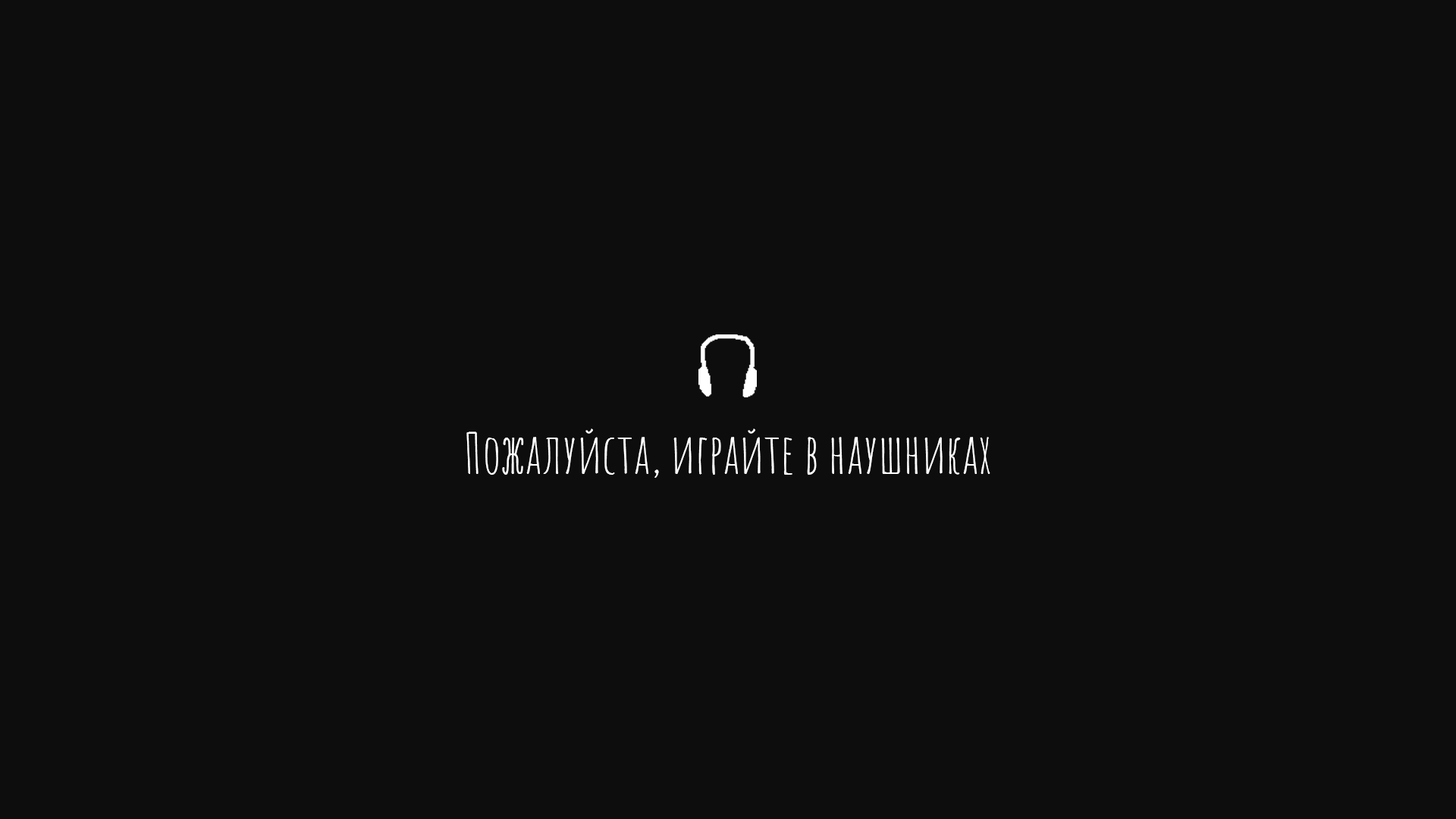
<style>
.page{position:relative;width:1456px;height:819px;background:#0d0d0d}
.page>*{position:absolute;margin:0}
.t1{font:54.6px "AmaticSC-Regular";color:#ffffff}
</style>
<div class="page">
<p class="t1" style="left:466px;top:428px;width:524px;height:50px">Пожалуйста, играйте в наушниках</p>
</div>
